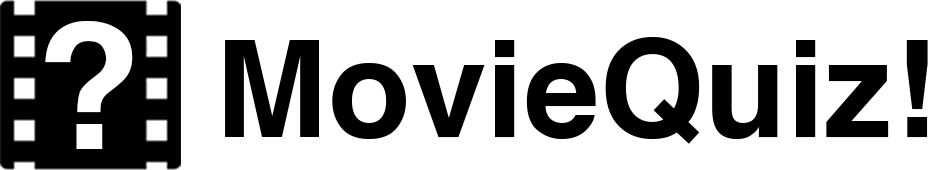
<style>
.page{position:relative;width:928px;height:170px;background:#ffffff}
.page>*{position:absolute;margin:0}
.t1{font:175.7px "Helvetica-Bold";color:#ffffff}
.t2{font:135.9px "Helvetica-Bold";color:#000000}
</style>
<div class="page">
<p class="t1" style="left:45px;top:21px;width:88px;height:128px">?</p>
<p class="t2" style="left:225px;top:37px;width:703px;height:107px">MovieQuiz!</p>
</div>
